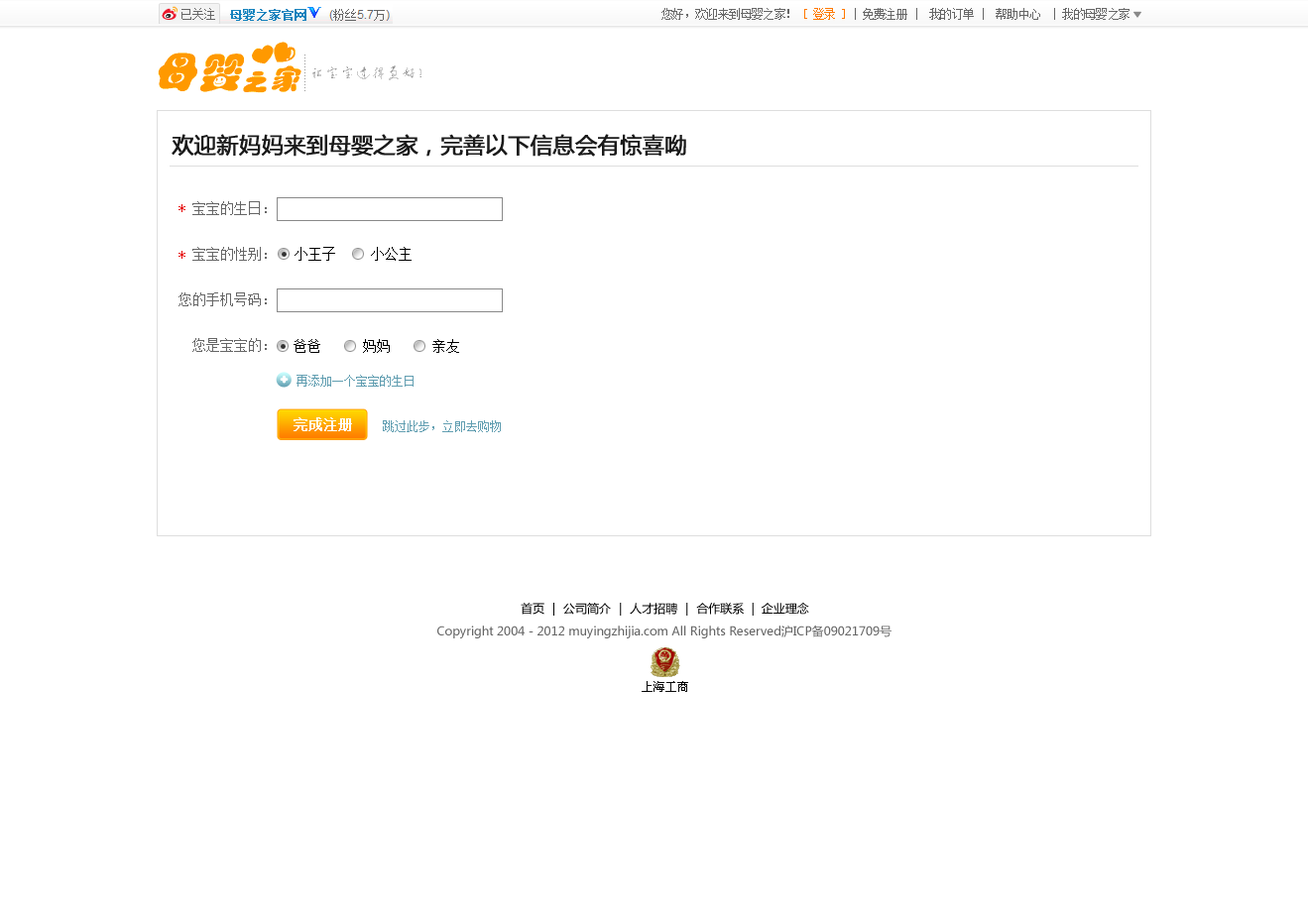
<style>
.page{position:relative;width:1308px;height:912px;background:#ffffff}
.page>*{position:absolute;margin:0}
.t1{font:11.9px "SimSun";letter-spacing:-0.05em;color:#666666}
.t2{font:11.9px "SimSun";letter-spacing:-0.05em;color:#ff7800}
.t3{font:21.8px "MicrosoftYaHei";color:#1a1a1a;font-weight:bold}
.t4{font:13.9px/45.6px "SimSun";color:#666666}
.t5{font:13.9px "SimSun";color:#d00000}
.t6{font:13.9px "SimSun";color:#000000}
.t7{font:11.9px "SimSun";color:#619eb1}
.t8{font:13.9px "SimSun";color:#ffffff;font-weight:bold}
.t9{font:11.9px "MicrosoftYaHei";color:#000000}
.t10{font:11.9px "MicrosoftYaHei";color:#666666}
</style>
<div class="page">
<p class="t1" style="left:661px;top:8px;width:468px;height:12px">您好，欢迎来到母婴之家！ <span class="t2">[ 登录 ]</span> | 免费注册 |  我的订单 |  帮助中心  | 我的母婴之家</p>
<p class="t3" style="left:171px;top:134px;width:515px;height:23px">欢迎新妈妈来到母婴之家，完善以下信息会有惊喜呦</p>
<p class="t4" style="left:178px;top:201px;width:89px;height:151px;text-align:right">宝宝的生日：<br>宝宝的性别：<br>您的手机号码：<br>您是宝宝的：</p>
<p class="t5" style="left:178px;top:204px;width:7px;height:8px">*</p>
<p class="t5" style="left:178px;top:251px;width:7px;height:8px">*</p>
<p class="t6" style="left:294px;top:247px;width:117px;height:14px">小王子     小公主</p>
<p class="t6" style="left:293px;top:339px;width:166px;height:14px">爸爸      妈妈      亲友</p>
<p class="t7" style="left:296px;top:375px;width:117px;height:12px">再添加一个宝宝的生日</p>
<p class="t8" style="left:293px;top:417px;width:59px;height:14px">完成注册</p>
<p class="t7" style="left:383px;top:420px;width:118px;height:12px">跳过此步，立即去购物</p>
<p class="t9" style="left:520px;top:603px;width:289px;height:13px">首页 ｜ 公司简介 ｜ 人才招聘 ｜ 合作联系  |  企业理念</p>
<p class="t10" style="left:437px;top:625px;width:454px;height:13px">Copyright 2004 - 2012 muyingzhijia.com All Rights Reserved沪ICP备09021709号</p>
</div>
